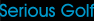
<style>
.page{position:relative;width:94px;height:21px;background:#000000}
.page>*{position:absolute;margin:0}
.t1{font:18px "AvantGardeITCbyBT-Medium";color:#0099cc}
</style>
<div class="page">
<p class="t1" style="left:0px;top:3px;width:95px;height:14px">Serious Golf</p>
</div>
